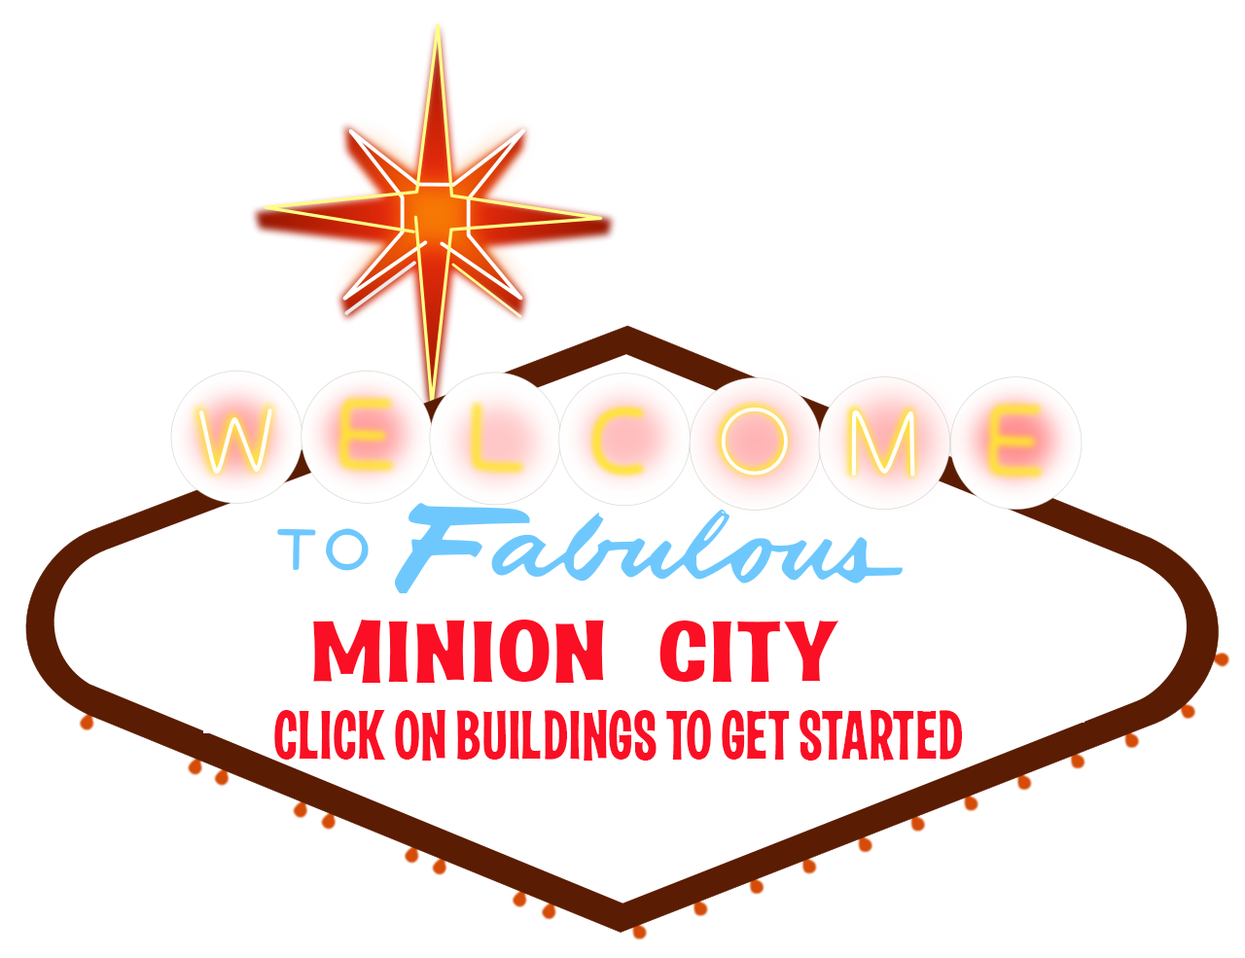
<style>
.page{position:relative;width:1245px;height:958px;background:#ffffff}
.page>*{position:absolute;margin:0}
.t1{font:87.5px "LasVegas-Jackpot";color:#fa0f25;text-transform:uppercase;scale:1.66 1}
.t2{font:70px "LasVegas-Jackpot";color:#fa0f25;text-transform:uppercase}
</style>
<div class="page">
<p class="t1" style="left:313px;top:619px;width:526px;height:64px">minion   city</p>
<p class="t2" style="left:274px;top:710px;width:688px;height:51px">click on buildings to get started</p>
</div>
